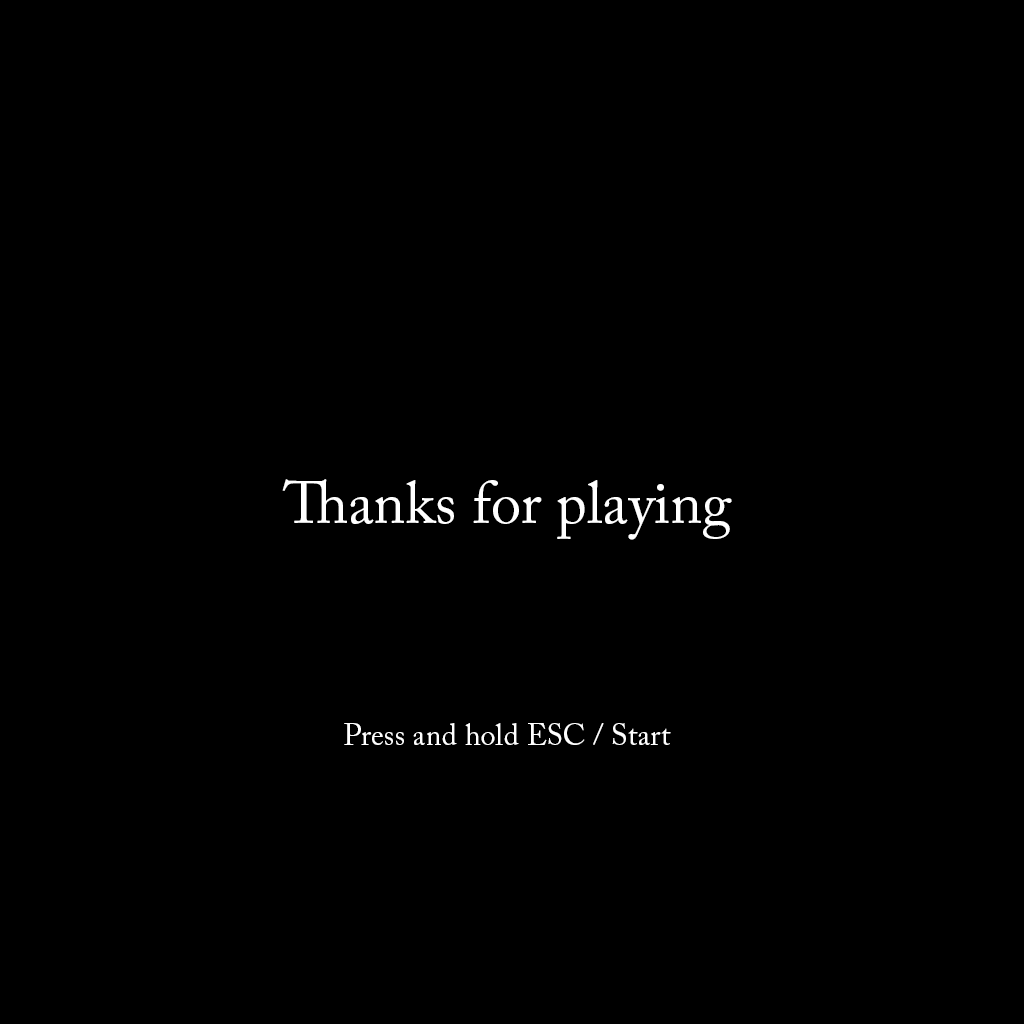
<style>
.page{position:relative;width:1024px;height:1024px;background:#000000}
.page>*{position:absolute;margin:0}
.t1{font:60px "ACaslonPro-Regular";color:#ffffff}
.t2{font:29.8px "ACaslonPro-Regular";color:#ffffff}
</style>
<div class="page">
<p class="t1" style="left:282px;top:479px;width:450px;height:61px">Thanks for playing</p>
<p class="t2" style="left:344px;top:723px;width:327px;height:22px">Press and hold ESC / Start</p>
</div>
